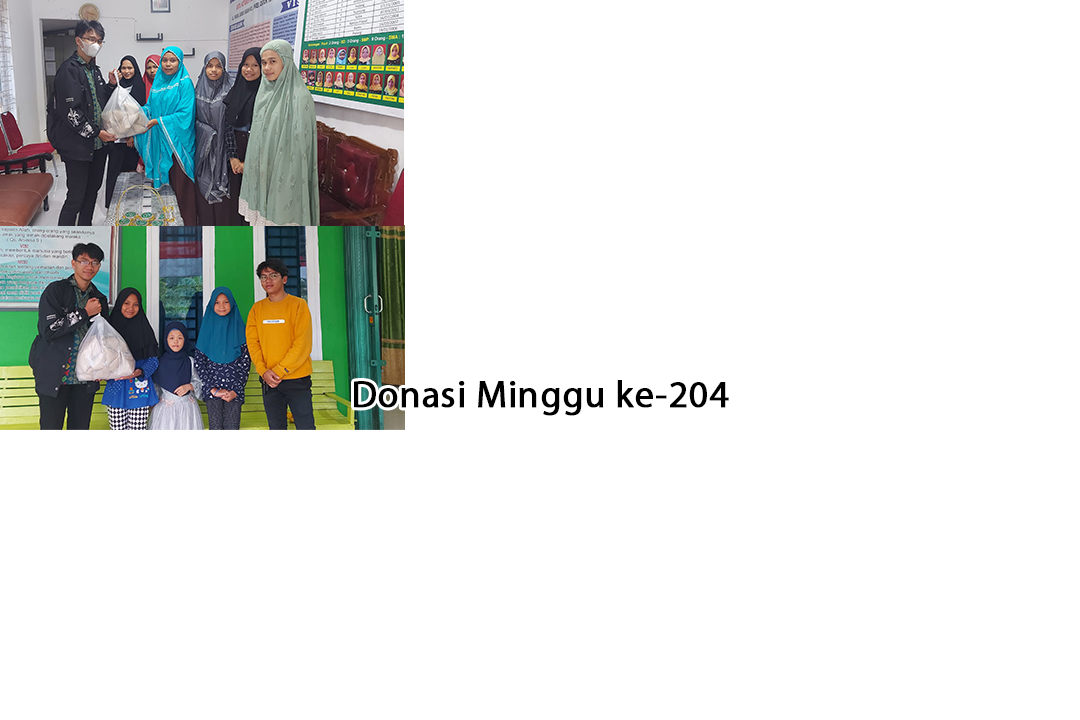
<style>
.page{position:relative;width:1080px;height:720px;background:#ffffff}
.page>*{position:absolute;margin:0}
.t1{font:38px "MyriadPro-Regular";color:#000000;font-weight:bold}
</style>
<div class="page">
<p class="t1" style="left:354px;top:380px;width:375px;height:36px">Donasi Minggu ke-204</p>
</div>
